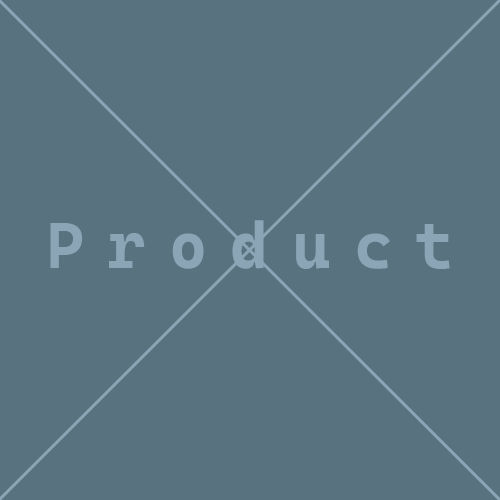
<style>
.page{position:relative;width:500px;height:500px;background:#58737f}
.page>*{position:absolute;margin:0}
.t1{font:65.3px "CascadiaCodeRoman-Bold";color:#8ba4b6}
</style>
<div class="page">
<p class="t1" style="left:50px;top:220px;width:400px;height:49px">Product</p>
</div>
